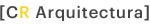
<style>
.page{position:relative;width:150px;height:26px;background:#ffffff}
.page>*{position:absolute;margin:0}
.t1{font:16.4px "Graphik-Medium";letter-spacing:0.05em;color:#464545}
.t2{font:16.4px "Graphik-Medium";letter-spacing:0.05em;color:#454444}
.t3{font:16.4px "Graphik-Medium";letter-spacing:0.05em;color:#f9d521}
</style>
<div class="page">
<p class="t1" style="left:0px;top:5px;width:149px;height:16px"><span class="t2">[C</span><span class="t3">R </span>Arquitectura]</p>
</div>
